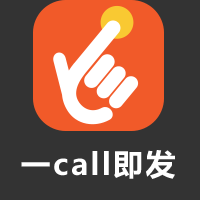
<style>
.page{position:relative;width:200px;height:200px;background:#333333}
.page>*{position:absolute;margin:0}
.t1{font:30px "MicrosoftYaHei-Bold";letter-spacing:0.08em;color:#ffffff}
</style>
<div class="page">
<p class="t1" style="left:21px;top:150px;width:154px;height:29px">一call即发</p>
</div>
